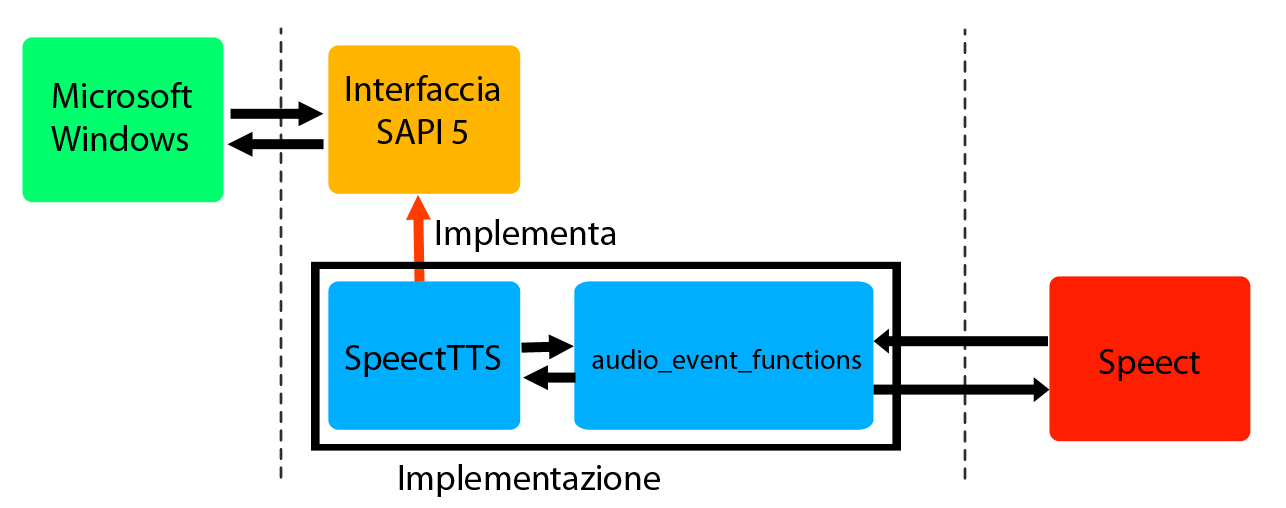
<style>
.page{position:relative;width:1286px;height:508px;background:#ffffff}
.page>*{position:absolute;margin:0}
.t1{font:36px "MyriadPro-Regular";color:#000000}
.t2{font:28px "MyriadPro-Regular";color:#000000}
</style>
<div class="page">
<p class="t1" style="left:346px;top:75px;width:154px;height:69px;text-align:center">Interfaccia<br>SAPI 5</p>
<p class="t1" style="left:51px;top:82px;width:141px;height:69px">Microsoft<br>Windows</p>
<p class="t1" style="left:436px;top:219px;width:180px;height:33px">Implementa</p>
<p class="t1" style="left:345px;top:345px;width:156px;height:32px">SpeectTTS</p>
<p class="t2" style="left:592px;top:349px;width:269px;height:24px">audio_event_functions</p>
<p class="t1" style="left:1099px;top:349px;width:101px;height:32px">Speect</p>
<p class="t1" style="left:399px;top:464px;width:261px;height:33px">Implementazione</p>
</div>
